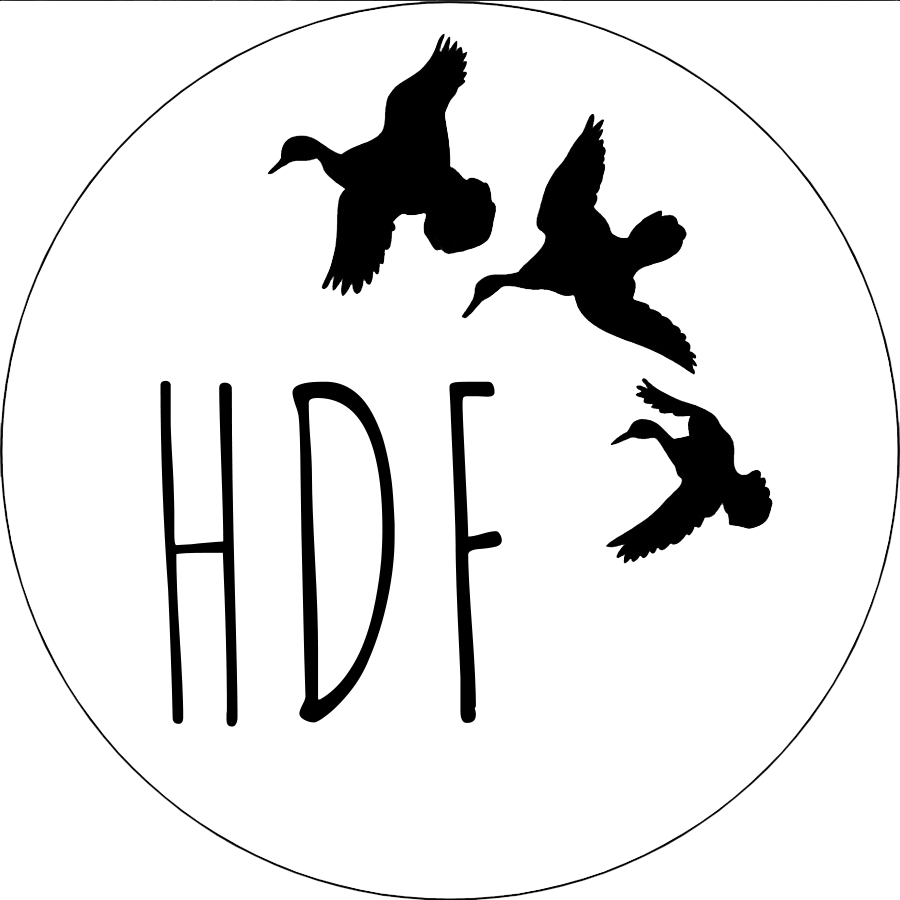
<style>
.page{position:relative;width:900px;height:900px;background:#ffffff}
.page>*{position:absolute;margin:0}
.t1{font:450px "AmaticSC-Regular";color:#000000;scale:0.9 1}
</style>
<div class="page">
<p class="t1" style="left:160px;top:379px;width:342px;height:347px">HDF</p>
</div>
